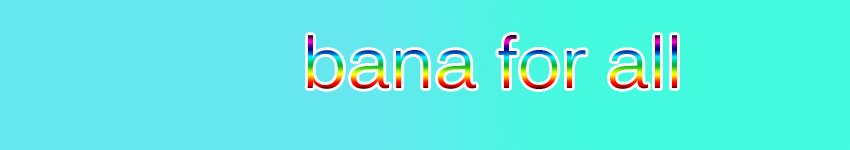
<style>
.page{position:relative;width:850px;height:150px;background:#66e7ef}
.page>*{position:absolute;margin:0}
.t1{font:72px "Kalinga"}
</style>
<div class="page">
<p class="t1" style="left:307px;top:35px;width:370px;height:54px">bana for all</p>
</div>
